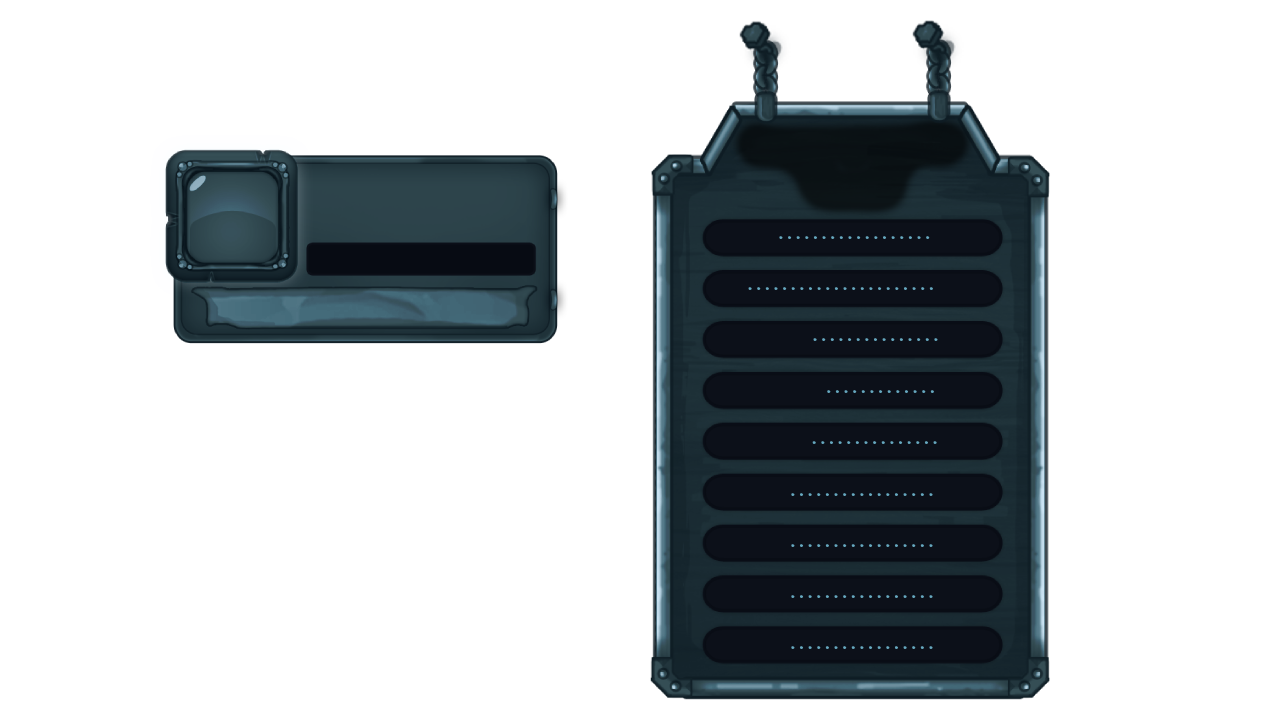
<style>
.page{position:relative;width:1280px;height:720px;background:#ffffff}
.page>*{position:absolute;margin:0}
.t1{font:17px "BMEULJIROTTF";letter-spacing:0.25em;color:#66a8bf;text-transform:uppercase;font-weight:bold}
</style>
<div class="page">
<p class="t1" style="left:779px;top:236px;width:151px;height:3px">..................</p>
<p class="t1" style="left:748px;top:287px;width:185px;height:3px">......................</p>
<p class="t1" style="left:813px;top:338px;width:125px;height:3px">...............</p>
<p class="t1" style="left:827px;top:390px;width:107px;height:3px">.............</p>
<p class="t1" style="left:812px;top:441px;width:125px;height:3px">...............</p>
<p class="t1" style="left:791px;top:493px;width:142px;height:3px">.................</p>
<p class="t1" style="left:791px;top:544px;width:142px;height:3px">.................</p>
<p class="t1" style="left:791px;top:595px;width:142px;height:3px">.................</p>
<p class="t1" style="left:791px;top:646px;width:142px;height:3px">.................</p>
</div>
